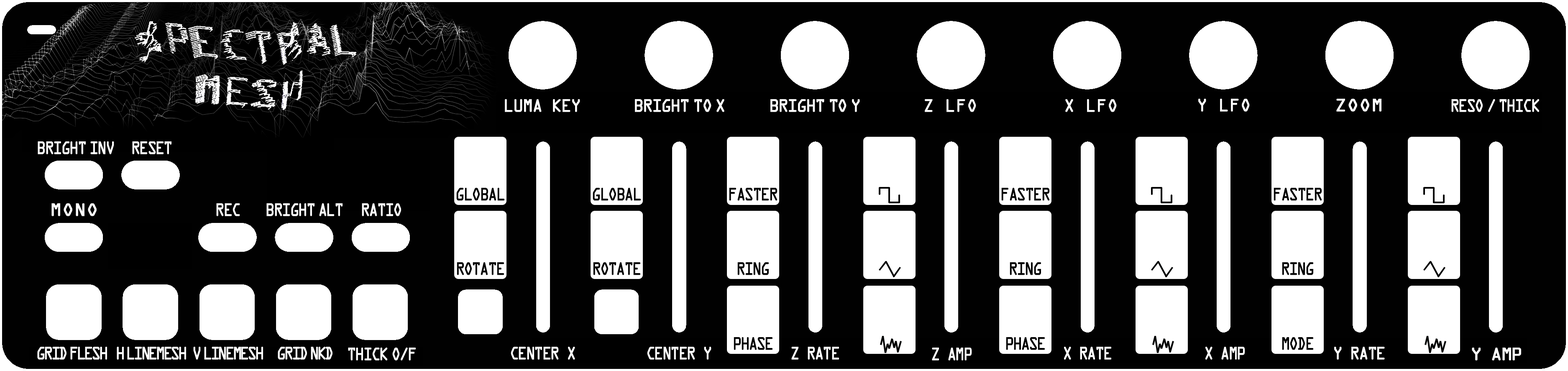
<style>
.page{position:relative;width:1568px;height:371px;background:#010101}
.page>*{position:absolute;margin:0}
.t1{font:19.2px "OCRAExtended";letter-spacing:-0.075em;color:#ffffff;text-transform:uppercase;font-weight:bold;scale:0.9 1}
.t2{font:19.2px "OCRAExtended";letter-spacing:-0.1em;color:#ffffff;text-transform:uppercase;font-weight:bold;scale:0.9 1}
.t3{font:19.2px "OCRAExtended";color:#ffffff;text-transform:uppercase;font-weight:bold;scale:0.9 1}
.t4{font:19.2px "OCRAExtended";color:#ffffff;text-transform:uppercase;font-weight:bold}
.t5{font:19.2px "OCRAExtended";letter-spacing:-0.1em;color:#ffffff;text-transform:uppercase;font-weight:bold;scale:0.8 1}
.t6{font:19.2px "OCRAExtended";letter-spacing:-0.1em;color:#000000;text-transform:uppercase;font-weight:bold;scale:0.8 1}
.t7{font:19.2px "OCRAExtended";letter-spacing:-0.11em;color:#000000;text-transform:uppercase;font-weight:bold;scale:0.8 1}
.t8{font:19.2px "OCRAExtended";letter-spacing:-0.15em;color:#ffffff;text-transform:uppercase;font-weight:bold;scale:0.8 1}
.t9{font:19.2px "OCRAExtended";letter-spacing:-0.1em;color:#ffffff;text-transform:uppercase;font-weight:bold;scale:0.85 1}
.t10{font:19.2px "OCRAExtended";letter-spacing:-0.1em;color:#ffffff;text-transform:uppercase;font-weight:bold}
</style>
<div class="page">
<p class="t1" style="left:505px;top:99px;width:75px;height:13px">LUMA KEY</p>
<p class="t2" style="left:635px;top:99px;width:89px;height:13px">BRIGHT TO X</p>
<p class="t2" style="left:770px;top:99px;width:90px;height:13px">BRIGHT TO Y</p>
<p class="t3" style="left:925px;top:99px;width:51px;height:13px">Z LFO</p>
<p class="t3" style="left:1065px;top:99px;width:52px;height:13px">X LFO</p>
<p class="t3" style="left:1198px;top:99px;width:52px;height:13px">Y LFO</p>
<p class="t4" style="left:1336px;top:99px;width:45px;height:13px">ZOOM</p>
<p class="t5" style="left:1451px;top:99px;width:88px;height:13px">RESO / THICK</p>
<p class="t5" style="left:38px;top:141px;width:76px;height:13px">BRIGHT INV</p>
<p class="t5" style="left:132px;top:141px;width:39px;height:13px">RESET</p>
<p class="t6" style="left:456px;top:188px;width:48px;height:13px">GLOBAL</p>
<p class="t6" style="left:593px;top:188px;width:48px;height:13px">GLOBAL</p>
<p class="t6" style="left:729px;top:188px;width:49px;height:13px">FASTER</p>
<p class="t6" style="left:1001px;top:188px;width:49px;height:13px">FASTER</p>
<p class="t6" style="left:1274px;top:188px;width:48px;height:13px">FASTER</p>
<p class="t4" style="left:51px;top:203px;width:46px;height:13px">MONO</p>
<p class="t5" style="left:216px;top:203px;width:24px;height:13px">REC</p>
<p class="t5" style="left:266px;top:203px;width:77px;height:13px">BRIGHT ALT</p>
<p class="t5" style="left:362px;top:203px;width:39px;height:13px">RATIO</p>
<p class="t7" style="left:457px;top:262px;width:47px;height:13px">ROTATE</p>
<p class="t7" style="left:593px;top:262px;width:47px;height:13px">ROTATE</p>
<p class="t7" style="left:737px;top:262px;width:32px;height:13px">RING</p>
<p class="t7" style="left:1010px;top:262px;width:31px;height:13px">RING</p>
<p class="t7" style="left:1282px;top:262px;width:31px;height:13px">RING</p>
<p class="t7" style="left:734px;top:337px;width:38px;height:13px">PHASE</p>
<p class="t7" style="left:1006px;top:337px;width:39px;height:13px">PHASE</p>
<p class="t7" style="left:1282px;top:337px;width:31px;height:13px">MODE</p>
<p class="t8" style="left:37px;top:347px;width:70px;height:13px">GRID FLESH</p>
<p class="t8" style="left:117px;top:347px;width:69px;height:13px">H LINEMESH</p>
<p class="t8" style="left:193px;top:347px;width:70px;height:13px">V LINEMESH</p>
<p class="t8" style="left:278px;top:347px;width:55px;height:13px">GRID NKD</p>
<p class="t5" style="left:348px;top:348px;width:68px;height:13px">THICK O/F</p>
<p class="t5" style="left:511px;top:347px;width:64px;height:13px">CENTER X</p>
<p class="t5" style="left:647px;top:347px;width:64px;height:13px">CENTER Y</p>
<p class="t5" style="left:791px;top:347px;width:48px;height:13px">Z RATE</p>
<p class="t5" style="left:932px;top:348px;width:40px;height:13px">Z AMP</p>
<p class="t5" style="left:1064px;top:347px;width:47px;height:13px">X RATE</p>
<p class="t5" style="left:1205px;top:347px;width:40px;height:13px">X AMP</p>
<p class="t9" style="left:1334px;top:347px;width:51px;height:13px">Y RATE</p>
<p class="t10" style="left:1472px;top:348px;width:49px;height:13px">Y AMP</p>
</div>
